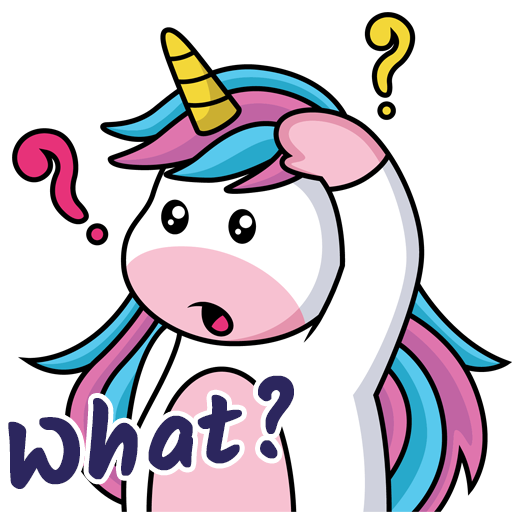
<style>
.page{position:relative;width:512px;height:512px;background:#ffffff}
.page>*{position:absolute;margin:0}
.t1{font:100px "Kalam-Bold";letter-spacing:0.025em;color:#2c265e;font-weight:bold}
</style>
<div class="page">
<p class="t1" style="left:8px;top:375px;width:286px;height:114px;rotate:-7deg">What?</p>
</div>
